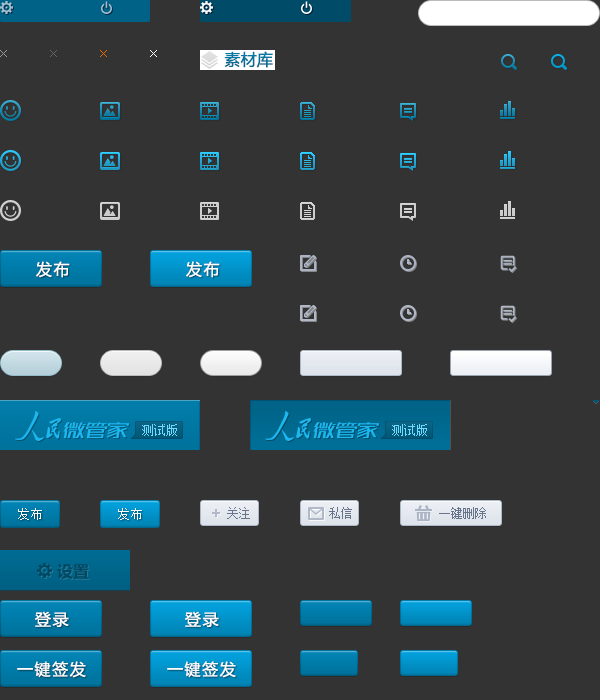
<style>
.page{position:relative;width:600px;height:700px;background:#333333}
.page>*{position:absolute;margin:0}
.t1{font:16px "MicrosoftYaHei";letter-spacing:0.1em;color:#fefeff}
.t2{font:12px "SimSun";color:#73d9ff}
.t3{font:12px "SimSun";letter-spacing:0.1em;color:#fefeff}
.t4{font:12px "SimSun";color:#68748a}
.t5{font:16px "MicrosoftYaHei-Bold";color:#004862}
</style>
<div class="page">
<p class="t1" style="left:36px;top:261px;width:34px;height:17px">发布</p>
<p class="t1" style="left:186px;top:261px;width:34px;height:17px">发布</p>
<p class="t2" style="left:392px;top:424px;width:35px;height:12px">测试版</p>
<p class="t3" style="left:18px;top:508px;width:24px;height:12px">发布</p>
<p class="t3" style="left:118px;top:508px;width:24px;height:12px">发布</p>
<p class="t4" style="left:227px;top:507px;width:23px;height:12px">关注</p>
<p class="t4" style="left:329px;top:507px;width:23px;height:12px">私信</p>
<p class="t4" style="left:439px;top:507px;width:47px;height:12px">一键删除</p>
<p class="t5" style="left:57px;top:563px;width:32px;height:16px">设置</p>
<p class="t1" style="left:35px;top:611px;width:34px;height:16px">登录</p>
<p class="t1" style="left:185px;top:611px;width:34px;height:16px">登录</p>
<p class="t1" style="left:17px;top:661px;width:69px;height:17px">一键签发</p>
<p class="t1" style="left:167px;top:661px;width:69px;height:17px">一键签发</p>
</div>
